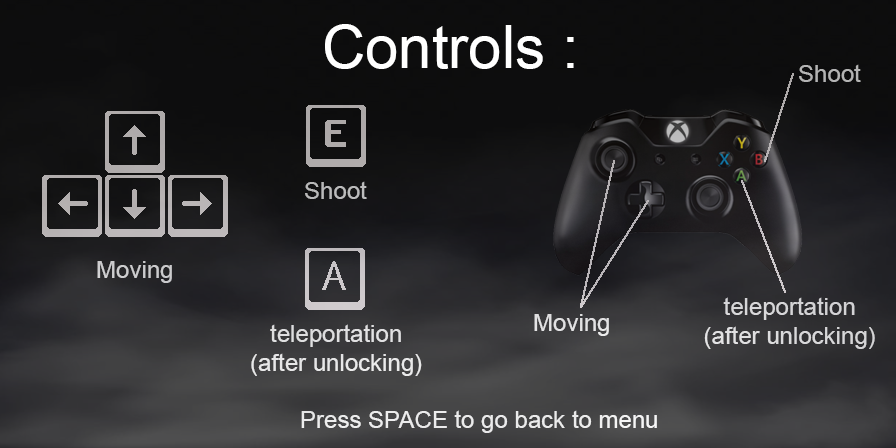
<style>
.page{position:relative;width:896px;height:448px}
.page>*{position:absolute;margin:0}
.t1{font:60px "ArialMT";color:#ffffff}
.t2{font:24px "ArialMT";color:#b4b4b4}
.t3{font:24px "ArialMT";color:#bbbbbc}
.t4{font:24px "ArialMT";color:#cccccd}
.t5{font:24px "ArialMT";color:#d8d7d9}
.t6{font:24px "ArialMT";color:#e3e3e4}
.t7{font:24px "ArialMT";color:#e5e5e6}
.t8{font:24px "ArialMT";color:#ffffff}
</style>
<div class="page">
<p class="t1" style="left:325px;top:24px;width:249px;height:45px">Controls :</p>
<p class="t2" style="left:799px;top:64px;width:62px;height:18px">Shoot</p>
<p class="t3" style="left:305px;top:181px;width:62px;height:18px">Shoot</p>
<p class="t4" style="left:97px;top:261px;width:75px;height:22px">Moving</p>
<p class="t5" style="left:704px;top:297px;width:171px;height:52px;text-align:center">teleportation<br>(after unlocking)</p>
<p class="t6" style="left:534px;top:314px;width:75px;height:22px">Moving</p>
<p class="t7" style="left:251px;top:324px;width:171px;height:52px;text-align:center">teleportation<br>(after unlocking)</p>
<p class="t8" style="left:301px;top:410px;width:356px;height:23px">Press SPACE to go back to menu</p>
</div>
